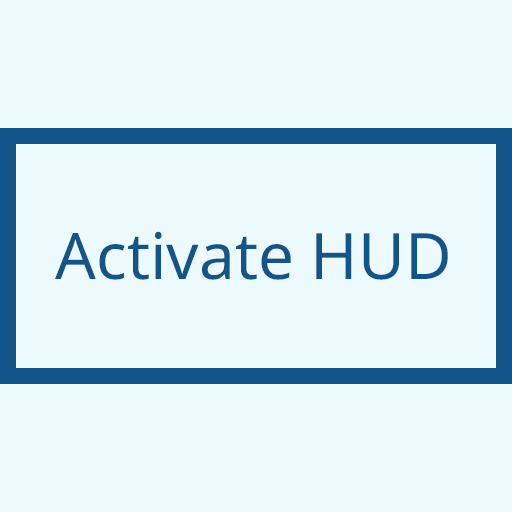
<style>
.page{position:relative;width:512px;height:512px;background:#edfafd}
.page>*{position:absolute;margin:0}
.t1{font:64px "NotoSans-Regular";color:#135589}
</style>
<div class="page">
<p class="t1" style="left:55px;top:231px;width:393px;height:49px">Activate HUD</p>
</div>
